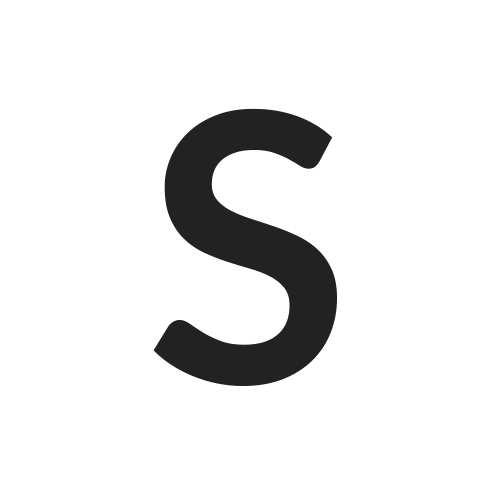
<style>
.page{position:relative;width:500px;height:500px;background:#ffffff}
.page>*{position:absolute;margin:0}
.t1{font:375px "Lato-Bold";color:#222222}
</style>
<div class="page">
<p class="t1" style="left:153px;top:108px;width:184px;height:278px">S</p>
</div>
